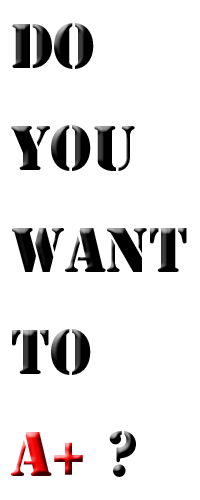
<style>
.page{position:relative;width:200px;height:500px;background:#ffffff}
.page>*{position:absolute;margin:0}
.t1{font:58.3px "StencilStd";color:#000000}
.t2{font:58.3px "StencilStd";color:#f20000}
</style>
<div class="page">
<p class="t1" style="left:11px;top:23px;width:176px;height:454px">Do <br>you <br>want<br>to<br><span class="t2">A+ </span>?</p>
</div>
